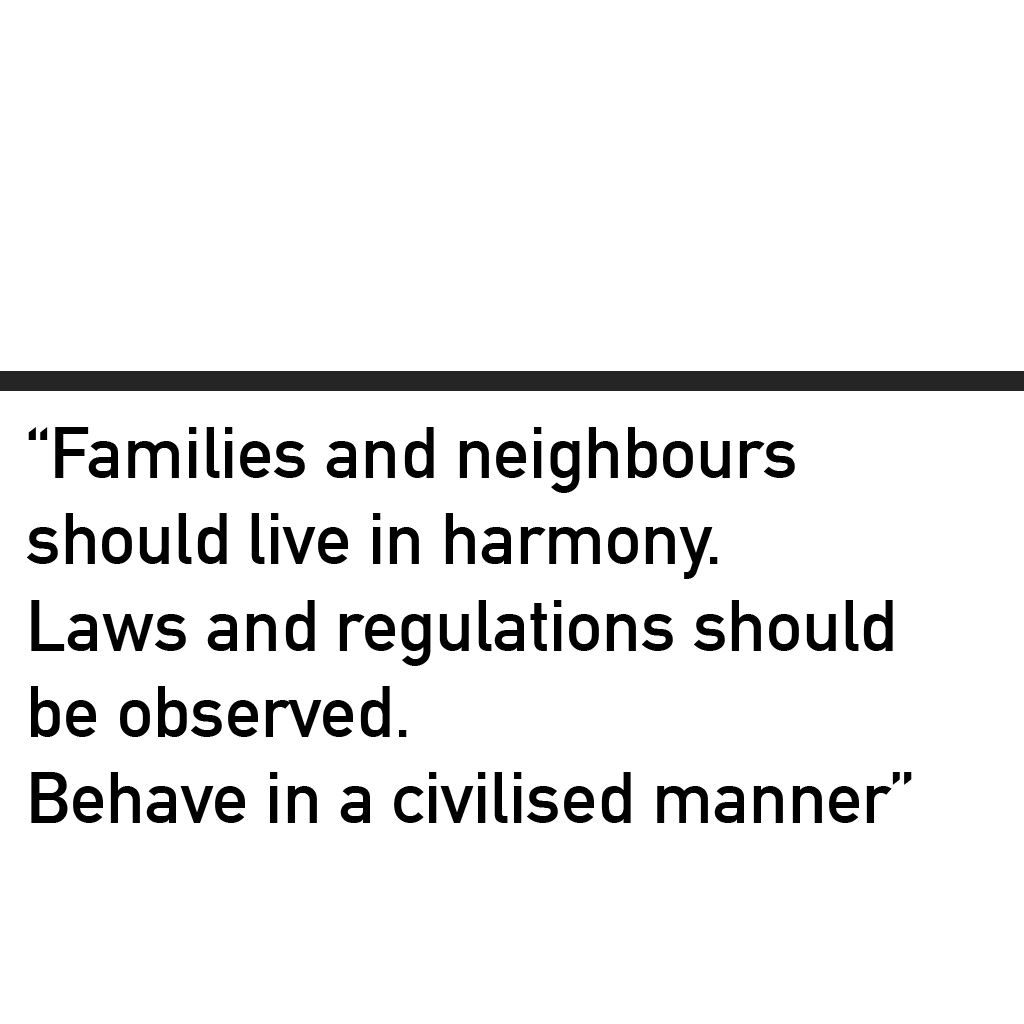
<style>
.page{position:relative;width:1024px;height:1024px;background:#ffffff}
.page>*{position:absolute;margin:0}
.t1{font:72px "DINAlternate-Bold";color:#000000}
</style>
<div class="page">
<p class="t1" style="left:27px;top:427px;width:885px;height:396px">“Families and neighbours <br>should live in harmony. <br>Laws and regulations should<br>be observed. <br>Behave in a civilised manner”</p>
</div>
